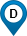
<style>
.page{position:relative;width:27px;height:36px;background:#ffffff}
.page>*{position:absolute;margin:0}
.t1{font:12px "Arial-BoldMT";letter-spacing:0.025em;color:#000000}
</style>
<div class="page">
<p class="t1" style="left:10px;top:9px;width:8px;height:9px">D</p>
</div>
